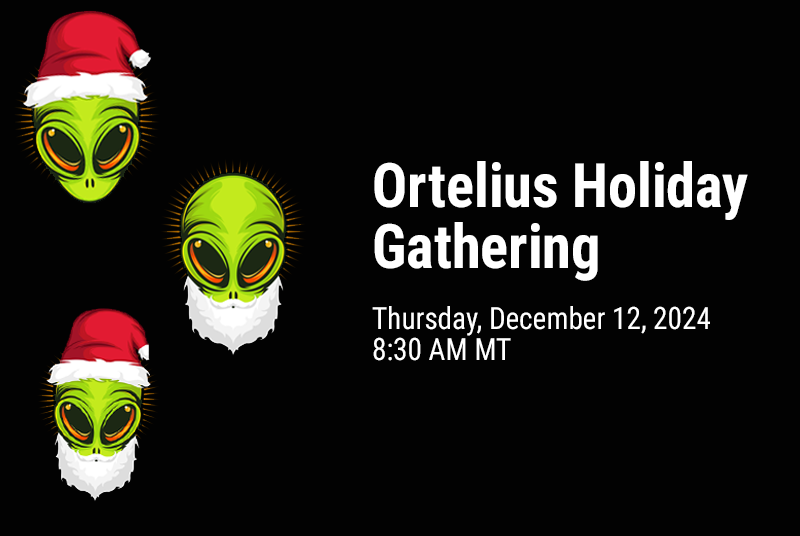
<style>
.page{position:relative;width:800px;height:536px;background:#020202}
.page>*{position:absolute;margin:0}
.t1{font:30.7px/30.7px "RobotoCondensed-Regular";color:#ffffff;scale:0.95 1}
.t2{font:61.3px/61.3px "RobotoCondensed-Bold";color:#ffffff;scale:0.95 1}
</style>
<div class="page">
<p class="t1" style="left:372px;top:161px;width:376px;height:200px"><span class="t2">Ortelius Holiday<br>Gathering<br><br></span>Thursday, December 12, 2024<br>8:30 AM MT</p>
</div>
